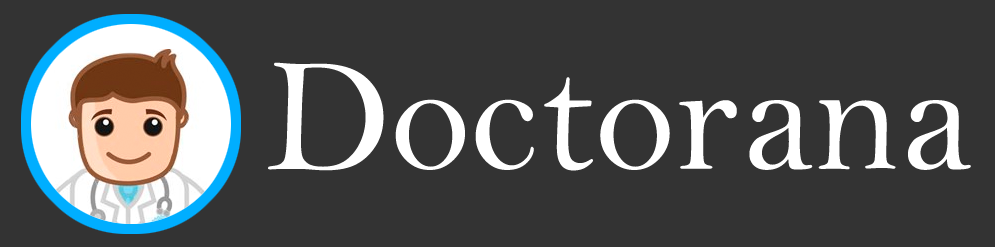
<style>
.page{position:relative;width:995px;height:247px;background:#333333}
.page>*{position:absolute;margin:0}
.t1{font:163.7px "BellMT";color:#ffffff}
</style>
<div class="page">
<p class="t1" style="left:268px;top:62px;width:703px;height:109px">Doctorana</p>
</div>
